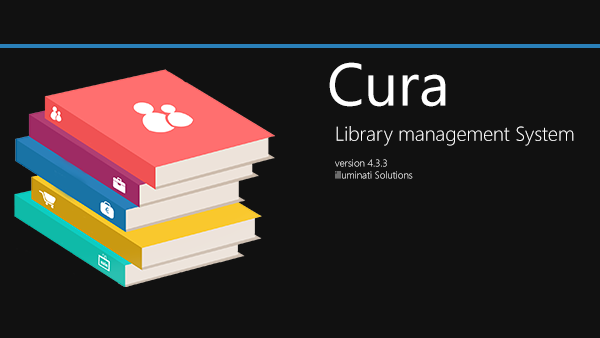
<style>
.page{position:relative;width:600px;height:338px;background:#111111}
.page>*{position:absolute;margin:0}
.t1{font:60px "SegoeUI";color:#ffffff}
.t2{font:20px "SegoeUI-Light";color:#ffffff}
.t3{font:10px "SegoeUI-Light"}
</style>
<div class="page">
<p class="t1" style="left:329px;top:62px;width:117px;height:45px">Cura</p>
<p class="t2" style="left:336px;top:126px;width:238px;height:20px">Library management System</p>
<p class="t3" style="left:335px;top:159px;width:78px;height:20px">version 4.3.3<br>illuminati Solutions</p>
</div>
